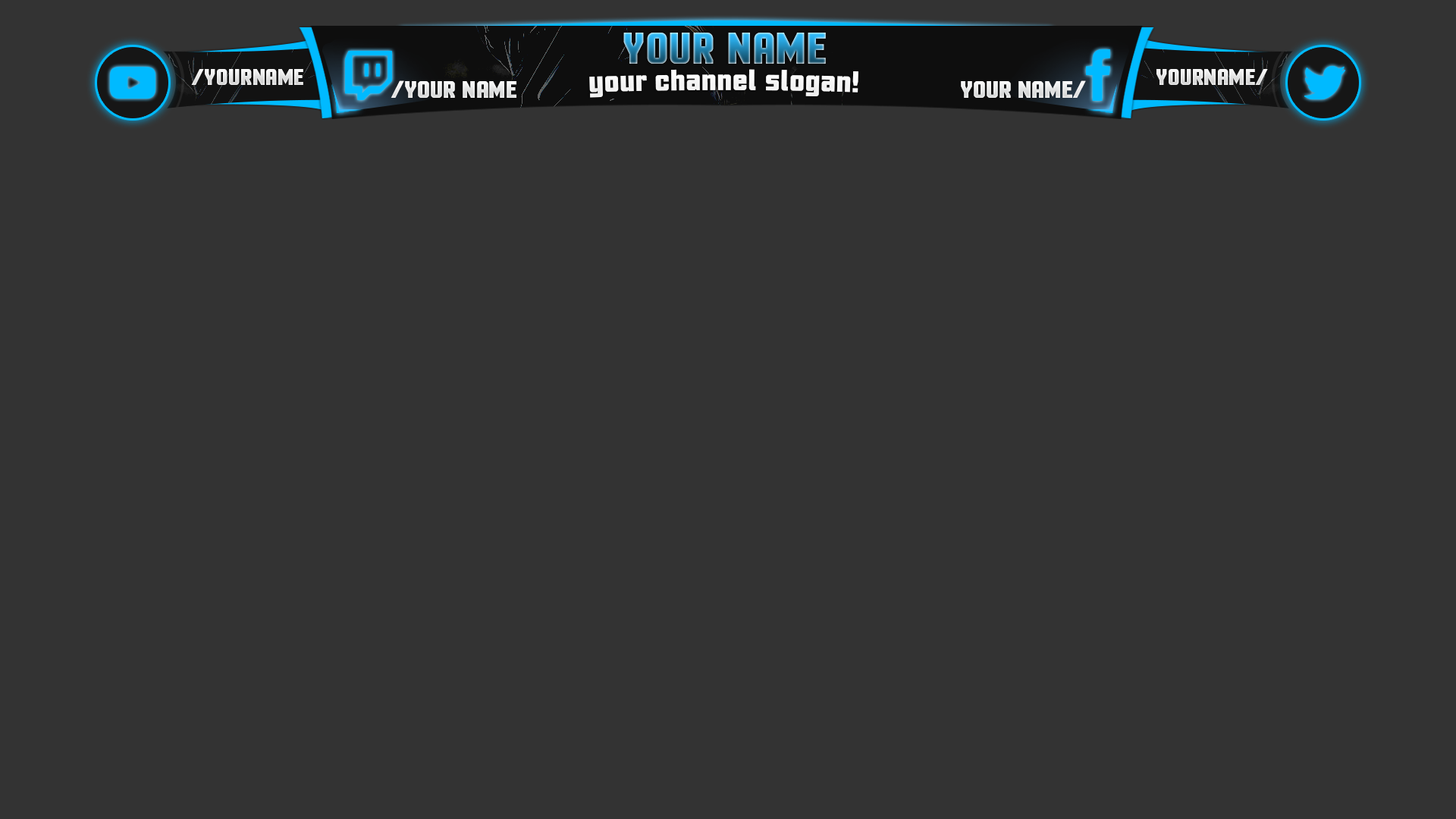
<style>
.page{position:relative;width:1456px;height:819px;background:#333333}
.page>*{position:absolute;margin:0}
.t1{font:54.7px "MotionControl-Bold"}
.t2{font:27.8px "MotionControl-Bold";color:#eaeaea}
.t3{font:36.4px "MotionControl-Bold";color:#f7f7f7}
.t4{font:29.4px "MotionControl-Bold";color:#feffff}
</style>
<div class="page">
<p class="t1" style="left:623px;top:33px;width:203px;height:31px">YOUR NAME</p>
<p class="t2" style="left:191px;top:69px;width:112px;height:16px">/YOURNAME</p>
<p class="t3" style="left:589px;top:69px;width:269px;height:29px">your channel slogan!</p>
<p class="t2" style="left:1156px;top:69px;width:112px;height:16px">YOURNAME/</p>
<p class="t4" style="left:391px;top:80px;width:125px;height:18px">/YOUR NAME</p>
<p class="t4" style="left:961px;top:80px;width:125px;height:18px">YOUR NAME/</p>
</div>
